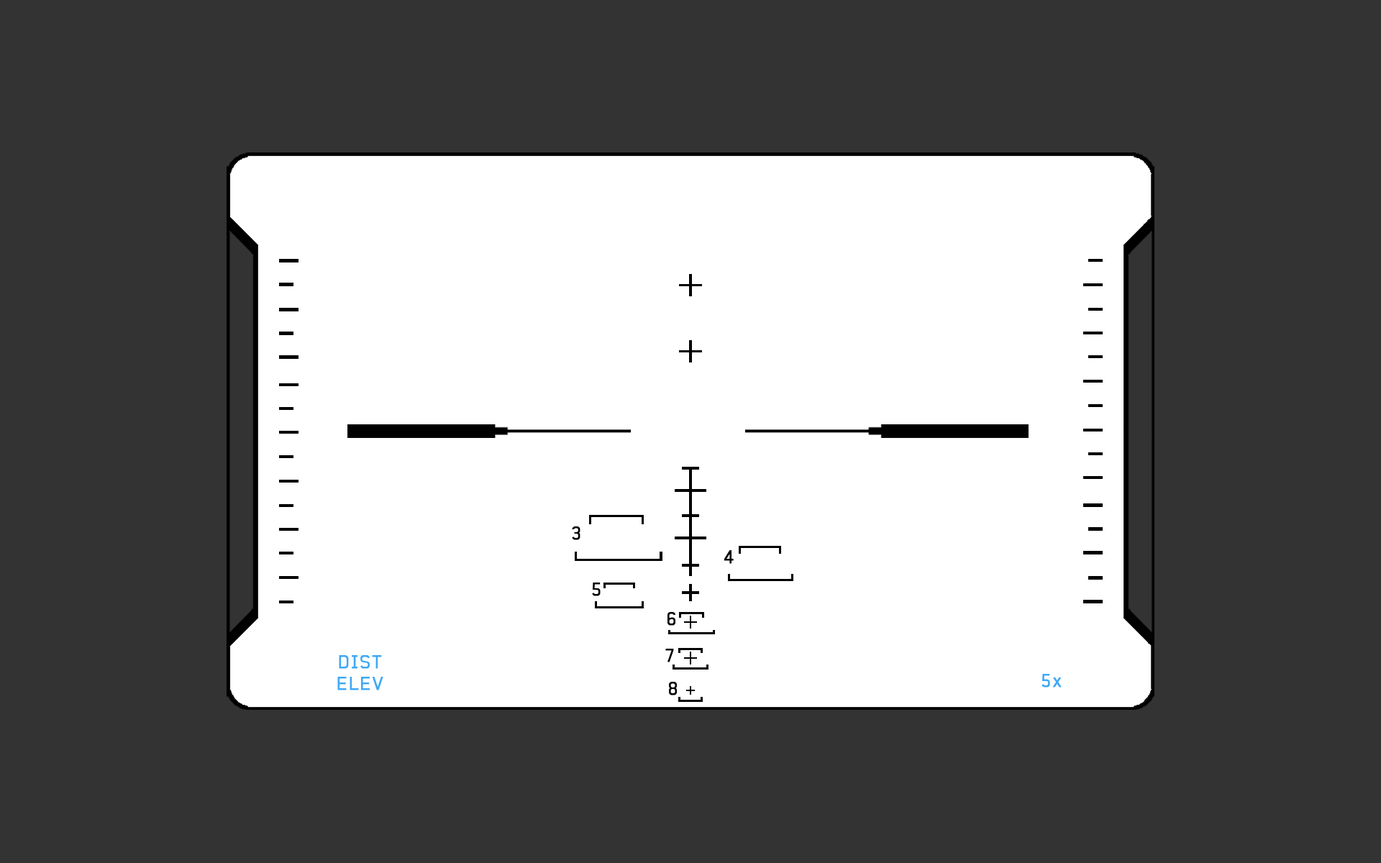
<style>
.page{position:relative;width:1381px;height:863px;background:#333333}
.page>*{position:absolute;margin:0}
.t1{font:17.8px "Baksheesh";letter-spacing:0.08em;color:#000000;font-weight:bold}
.t2{font:18px/21.6px "Baksheesh";letter-spacing:0.08em;color:#3ea8f5;font-weight:bold}
.t3{font:18px "Baksheesh";letter-spacing:0.08em;color:#3ea8f5;font-weight:bold}
</style>
<div class="page">
<p class="t1" style="left:572px;top:527px;width:9px;height:13px">3</p>
<p class="t1" style="left:724px;top:550px;width:10px;height:14px">4</p>
<p class="t1" style="left:592px;top:583px;width:9px;height:13px">5</p>
<p class="t1" style="left:668px;top:612px;width:8px;height:14px">6</p>
<p class="t1" style="left:665px;top:649px;width:9px;height:14px">7</p>
<p class="t2" style="left:337px;top:655px;width:46px;height:36px;text-align:center">DIST<br>ELEV</p>
<p class="t3" style="left:1042px;top:674px;width:20px;height:14px">5x</p>
<p class="t1" style="left:669px;top:682px;width:8px;height:14px">8</p>
</div>
